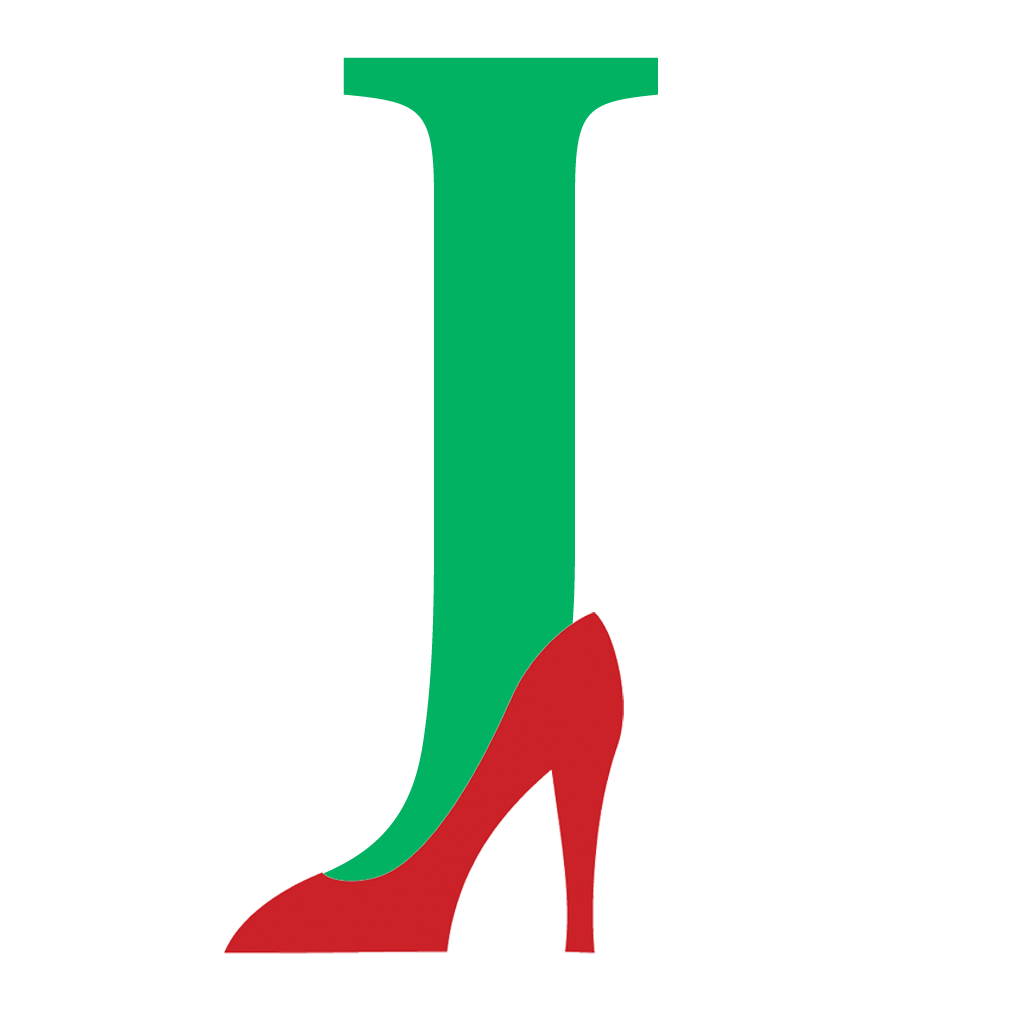
<style>
.page{position:relative;width:1024px;height:1024px;background:#ffffff}
.page>*{position:absolute;margin:0}
.t1{font:1051.2px "MinionPro-Bold";color:#01b262}
</style>
<div class="page">
<p class="t1" style="left:323px;top:57px;width:335px;height:856px">J</p>
</div>
